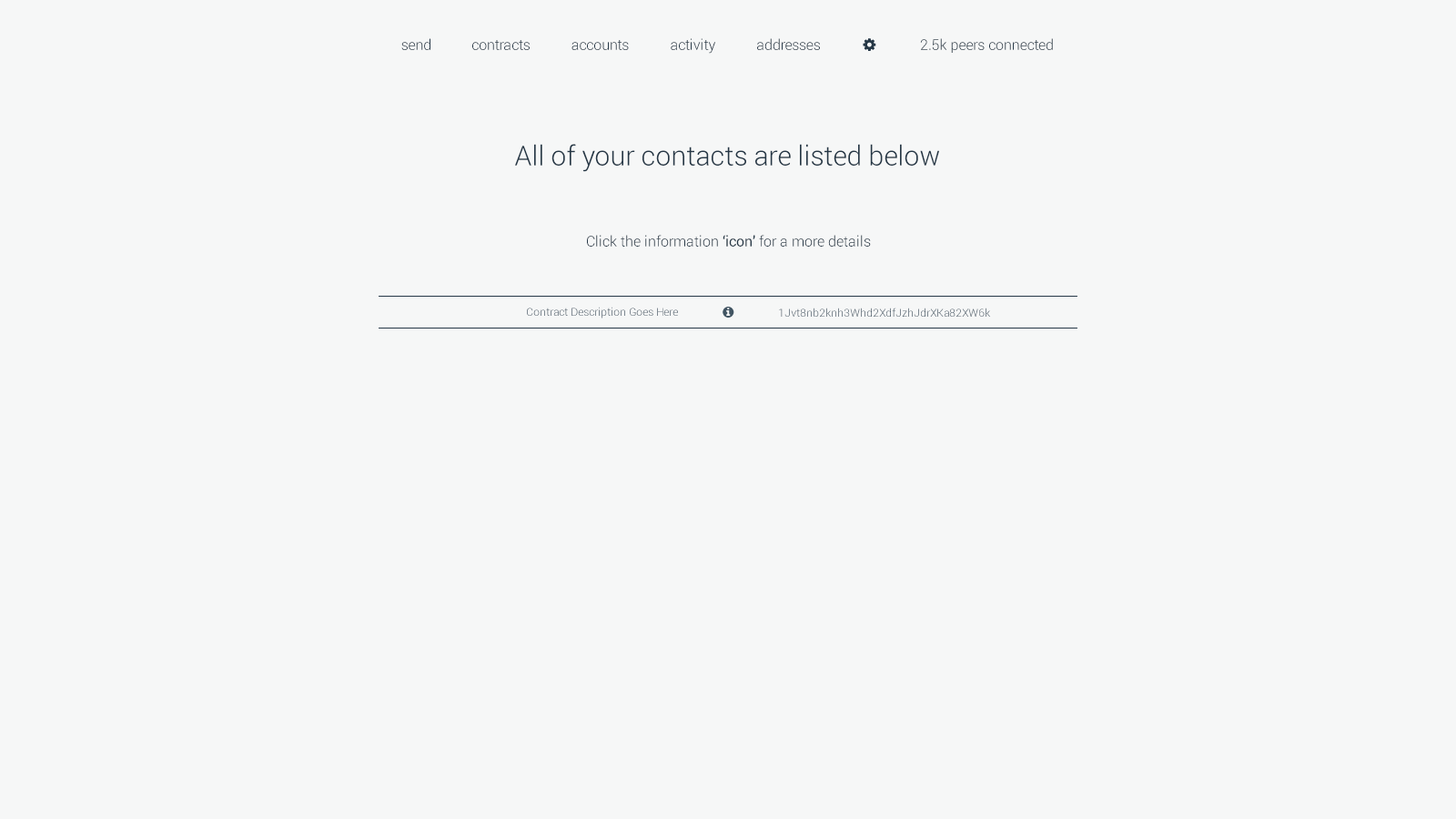
<style>
.page{position:relative;width:1456px;height:819px;background:#f6f7f7}
.page>*{position:absolute;margin:0}
.t1{font:14.6px "Roboto-Light";color:#253746}
.t2{font:27.5px "Roboto-Light";color:#253746}
.t3{font:14.6px "Roboto-Regular";color:#253746}
.t4{font:10.9px "Roboto-Light"}
</style>
<div class="page">
<p class="t1" style="left:401px;top:38px;width:29px;height:12px">send</p>
<p class="t1" style="left:472px;top:40px;width:58px;height:10px">contracts</p>
<p class="t1" style="left:571px;top:40px;width:58px;height:10px">accounts</p>
<p class="t1" style="left:671px;top:38px;width:44px;height:16px">activity</p>
<p class="t1" style="left:757px;top:38px;width:63px;height:12px">addresses</p>
<p class="t1" style="left:920px;top:38px;width:133px;height:15px">2.5k peers connected</p>
<p class="t2" style="left:515px;top:144px;width:424px;height:28px">All of your contacts are listed below</p>
<p class="t1" style="left:587px;top:235px;width:284px;height:12px">Click the information <span class="t3">‘icon’ </span>for a more details</p>
<p class="t4" style="left:527px;top:307px;width:151px;height:11px">Contract Description Goes Here</p>
<p class="t4" style="left:779px;top:308px;width:211px;height:9px">1Jvt8nb2knh3Whd2XdfJzhJdrXKa82XW6k</p>
</div>
